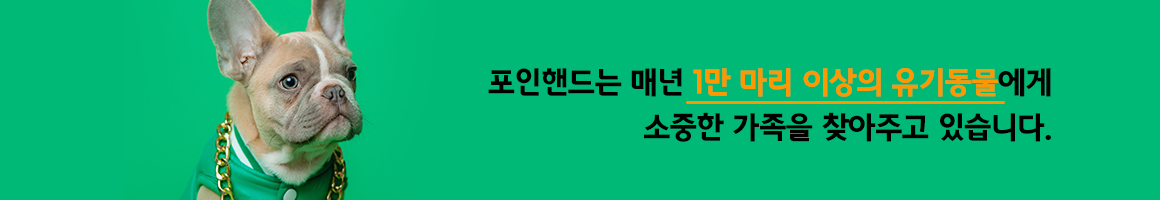
<style>
.page{position:relative;width:1160px;height:200px;background:#01b976}
.page>*{position:absolute;margin:0}
.t1{font:30px/45px "GoyangDeogyangEB-Regular";letter-spacing:-0.03em;color:#000000}
.t2{font:30px/45px "GoyangDeogyangEB-Regular";letter-spacing:-0.03em;color:#ff9700}
</style>
<div class="page">
<p class="t1" style="left:488px;top:68px;width:563px;height:74px;text-align:right">포인핸드는 매년 <span class="t2">1만 마리 이상의 유기동물</span>에게<br>소중한 가족을 찾아주고 있습니다.</p>
</div>
